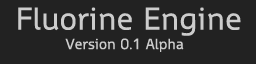
<style>
.page{position:relative;width:256px;height:64px;background:#222222}
.page>*{position:absolute;margin:0}
.t1{font:30px "WascoSans";color:#cccccc}
.t2{font:14px "WascoSans";color:#cccccc}
</style>
<div class="page">
<p class="t1" style="left:18px;top:7px;width:223px;height:29px">Fluorine Engine</p>
<p class="t2" style="left:65px;top:38px;width:119px;height:14px">Version 0.1 Alpha</p>
</div>
